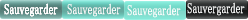
<style>
.page{position:relative;width:248px;height:20px}
.page>*{position:absolute;margin:0}
.t1{font:14.4px "MS-PMincho";color:#ffffff;font-weight:bold;scale:0.69 1}
</style>
<div class="page">
<p class="t1" style="left:4px;top:3px;width:54px;height:14px">Sauvegarder</p>
<p class="t1" style="left:4px;top:3px;width:54px;height:14px">Sauvegarder</p>
<p class="t1" style="left:4px;top:3px;width:54px;height:14px">Sauvegarder</p>
<p class="t1" style="left:67px;top:3px;width:54px;height:14px">Sauvegarder</p>
<p class="t1" style="left:127px;top:4px;width:54px;height:14px">Sauvegarder</p>
<p class="t1" style="left:187px;top:2px;width:58px;height:14px">Sauvergarder</p>
</div>
